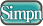
<style>
.page{position:relative;width:43px;height:26px}
.page>*{position:absolute;margin:0}
.t1{font:18px "RyuminPro-ExBold";letter-spacing:-0.08em;color:#ffffff;scale:0.9 1}
</style>
<div class="page">
<p class="t1" style="left:1px;top:5px;width:42px;height:18px">Simpn</p>
</div>
